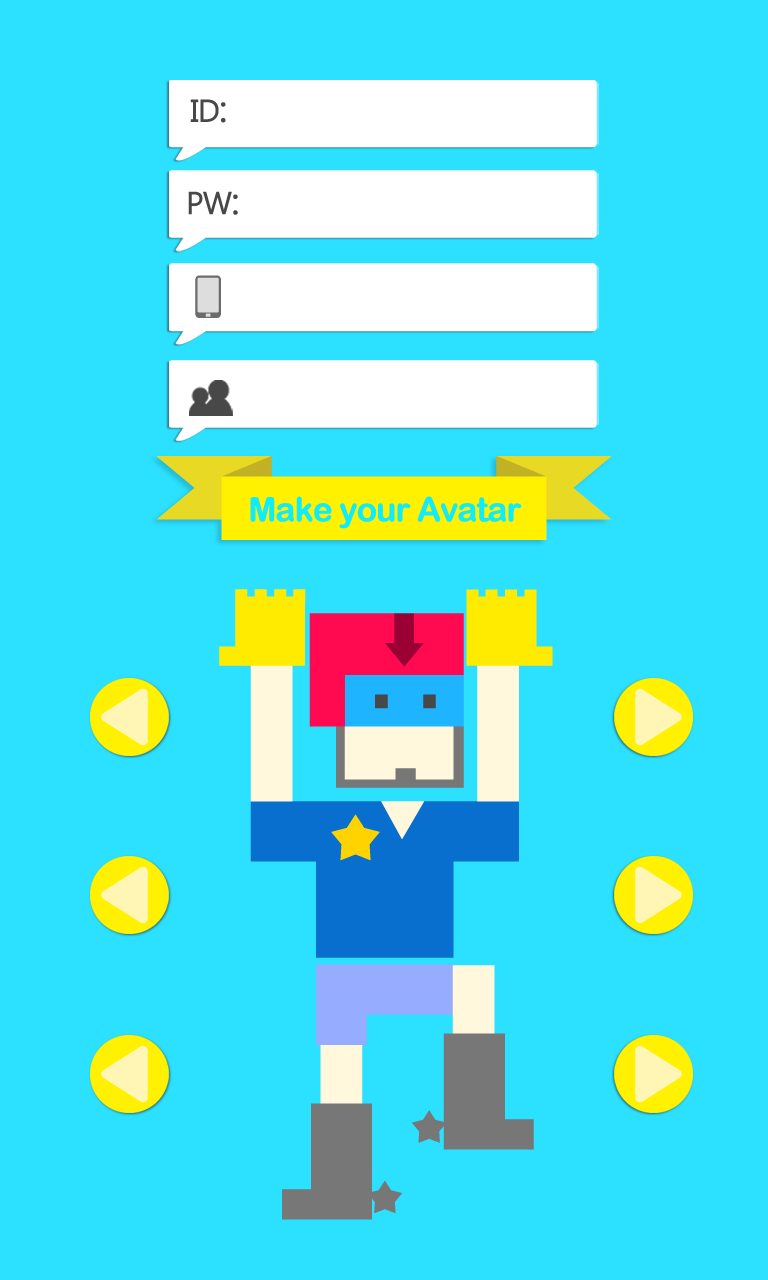
<style>
.page{position:relative;width:768px;height:1280px;background:#2ce0ff}
.page>*{position:absolute;margin:0}
.t1{font:30.8px "MalgunGothicRegular";letter-spacing:-0.05em;color:#484848;font-weight:bold}
.t2{font:36.6px "MalgunGothicRegular";letter-spacing:-0.05em;color:#484848;font-weight:bold}
.t3{font:33.3px "ArialRoundedMTBold";letter-spacing:-0.05em;color:#10ecfa;font-weight:bold}
</style>
<div class="page">
<p class="t1" style="left:190px;top:99px;width:36px;height:24px">ID<span class="t2">:</span></p>
<p class="t1" style="left:188px;top:191px;width:50px;height:24px">PW<span class="t2">:</span></p>
<p class="t3" style="left:250px;top:496px;width:272px;height:33px">Make your Avatar</p>
</div>
